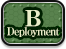
<style>
.page{position:relative;width:66px;height:49px}
.page>*{position:absolute;margin:0}
.t1{font:11px/9px "RyuminPro-ExBold";letter-spacing:-0.08em;color:#eaedc8}
.t2{font:22px/9px "RyuminPro-ExHeavy";letter-spacing:-0.08em;color:#eaedc8}
</style>
<div class="page">
<p class="t1" style="left:7px;top:10px;width:53px;height:27px;text-align:center"><span class="t2">B<br></span>Deployment</p>
</div>
